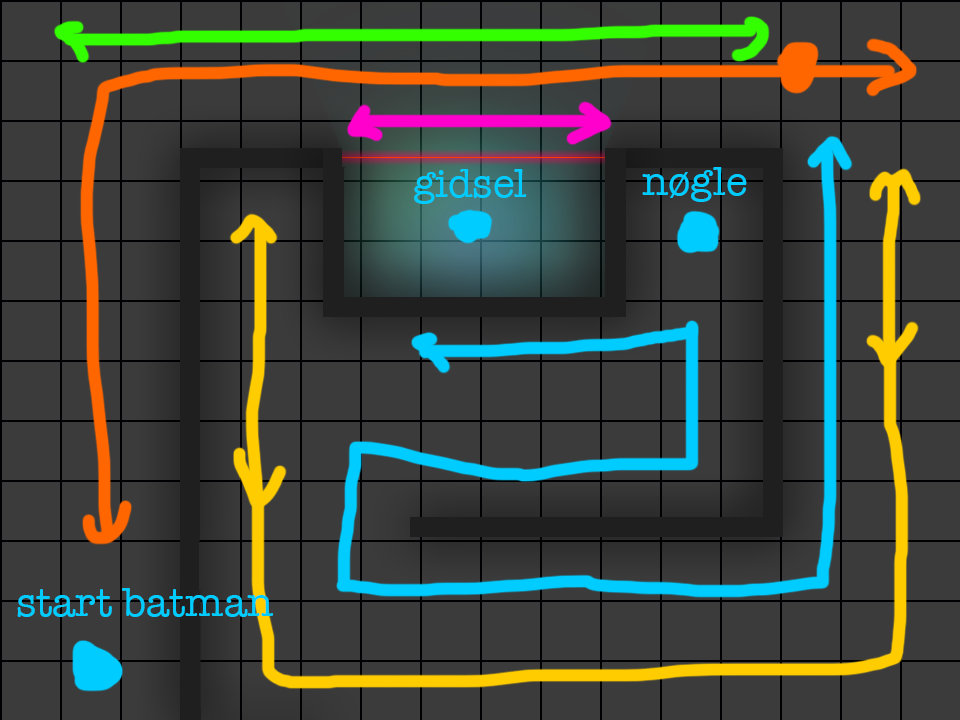
<style>
.page{position:relative;width:960px;height:720px;background:#3b3b3b}
.page>*{position:absolute;margin:0}
.t1{font:41px "AmericanTypewriter";color:#00ccff}
</style>
<div class="page">
<p class="t1" style="left:414px;top:169px;width:113px;height:35px">gidsel</p>
<p class="t1" style="left:642px;top:167px;width:105px;height:35px">nøgle</p>
<p class="t1" style="left:17px;top:588px;width:257px;height:29px">start batman</p>
</div>
